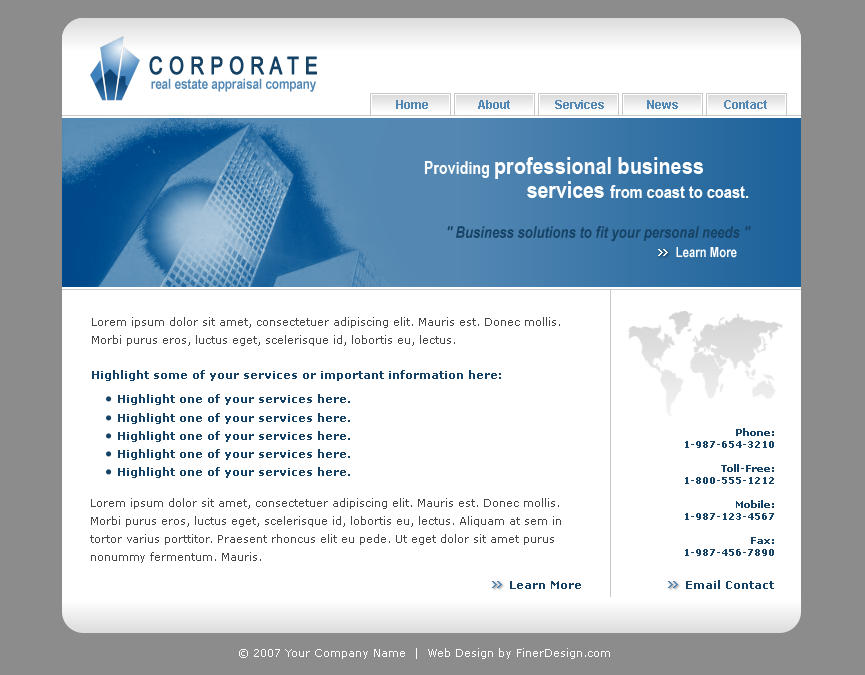
<style>
.page{position:relative;width:865px;height:675px;background:#ffffff}
.page>*{position:absolute;margin:0}
.t1{font:24px "ArialNarrow";color:#164365;font-weight:bold;scale:0.96 1}
.t2{font:14px "ArialNarrow-Bold";color:#5288b3}
.t3{font:12px "Arial-BoldMT";color:#5288b3}
.t4{font:24px "ArialNarrow-Bold";color:#ffffff}
.t5{font:18px "ArialNarrow-Bold";color:#ffffff;scale:0.97 1}
.t6{font:18px "ArialNarrow-Bold";color:#ffffff}
.t7{font:16px "ArialNarrow-BoldItalic";color:#164365}
.t8{font:14px "ArialNarrow-Bold";color:#ffffff}
.t9{font:11px/18px "Verdana";color:#464646}
.t10{font:11px "Verdana-Bold";color:#164365}
.t11{font:10px "Verdana-Bold";color:#164365}
.t12{font:11px "Verdana";color:#fefefe}
</style>
<div class="page">
<p class="t1" style="left:149px;top:56px;width:168px;height:19px">C O R P O R A T E</p>
<p class="t2" style="left:151px;top:78px;width:165px;height:14px">real estate appraisal company</p>
<p class="t3" style="left:396px;top:100px;width:32px;height:9px">Home</p>
<p class="t3" style="left:478px;top:100px;width:32px;height:9px">About</p>
<p class="t3" style="left:555px;top:100px;width:49px;height:9px">Services</p>
<p class="t3" style="left:647px;top:100px;width:31px;height:9px">News</p>
<p class="t3" style="left:724px;top:100px;width:43px;height:9px">Contact</p>
<p class="t4" style="left:424px;top:157px;width:279px;height:22px"><span class="t5">Providing </span>professional business</p>
<p class="t6" style="left:527px;top:181px;width:222px;height:17px"><span class="t4">services </span>from coast to coast.</p>
<p class="t7" style="left:447px;top:226px;width:304px;height:16px">" Business solutions to fit your personal needs "</p>
<p class="t8" style="left:676px;top:247px;width:61px;height:11px">Learn More</p>
<p class="t9" style="left:92px;top:317px;width:468px;height:29px">Lorem ipsum dolor sit amet, consectetuer adipiscing elit. Mauris est. Donec mollis. <br>Morbi purus eros, luctus eget, scelerisque id, lobortis eu, lectus.</p>
<p class="t10" style="left:92px;top:370px;width:409px;height:11px">Highlight some of your services or important information here:</p>
<p class="t10" style="left:118px;top:394px;width:232px;height:11px">Highlight one of your services here.</p>
<p class="t10" style="left:118px;top:413px;width:232px;height:11px">Highlight one of your services here.</p>
<p class="t10" style="left:118px;top:431px;width:232px;height:11px">Highlight one of your services here.</p>
<p class="t11" style="left:685px;top:428px;width:89px;height:128px;text-align:right">Phone:<br>1-987-654-3210<br><br>Toll-Free:<br>1-800-555-1212<br><br>Mobile:<br>1-987-123-4567<br><br>Fax:<br>1-987-456-7890</p>
<p class="t10" style="left:118px;top:449px;width:232px;height:11px">Highlight one of your services here.</p>
<p class="t10" style="left:118px;top:467px;width:232px;height:11px">Highlight one of your services here.</p>
<p class="t9" style="left:90px;top:498px;width:471px;height:65px">Lorem ipsum dolor sit amet, consectetuer adipiscing elit. Mauris est. Donec mollis. <br>Morbi purus eros, luctus eget, scelerisque id, lobortis eu, lectus. Aliquam at sem in <br>tortor varius porttitor. Praesent rhoncus elit eu pede. Ut eget dolor sit amet purus <br>nonummy fermentum. Mauris.</p>
<p class="t10" style="left:510px;top:581px;width:71px;height:8px">Learn More</p>
<p class="t10" style="left:686px;top:580px;width:88px;height:9px">Email Contact</p>
<p class="t12" style="left:239px;top:648px;width:371px;height:11px">© 2007 Your Company Name  |  Web Design by FinerDesign.com</p>
</div>
